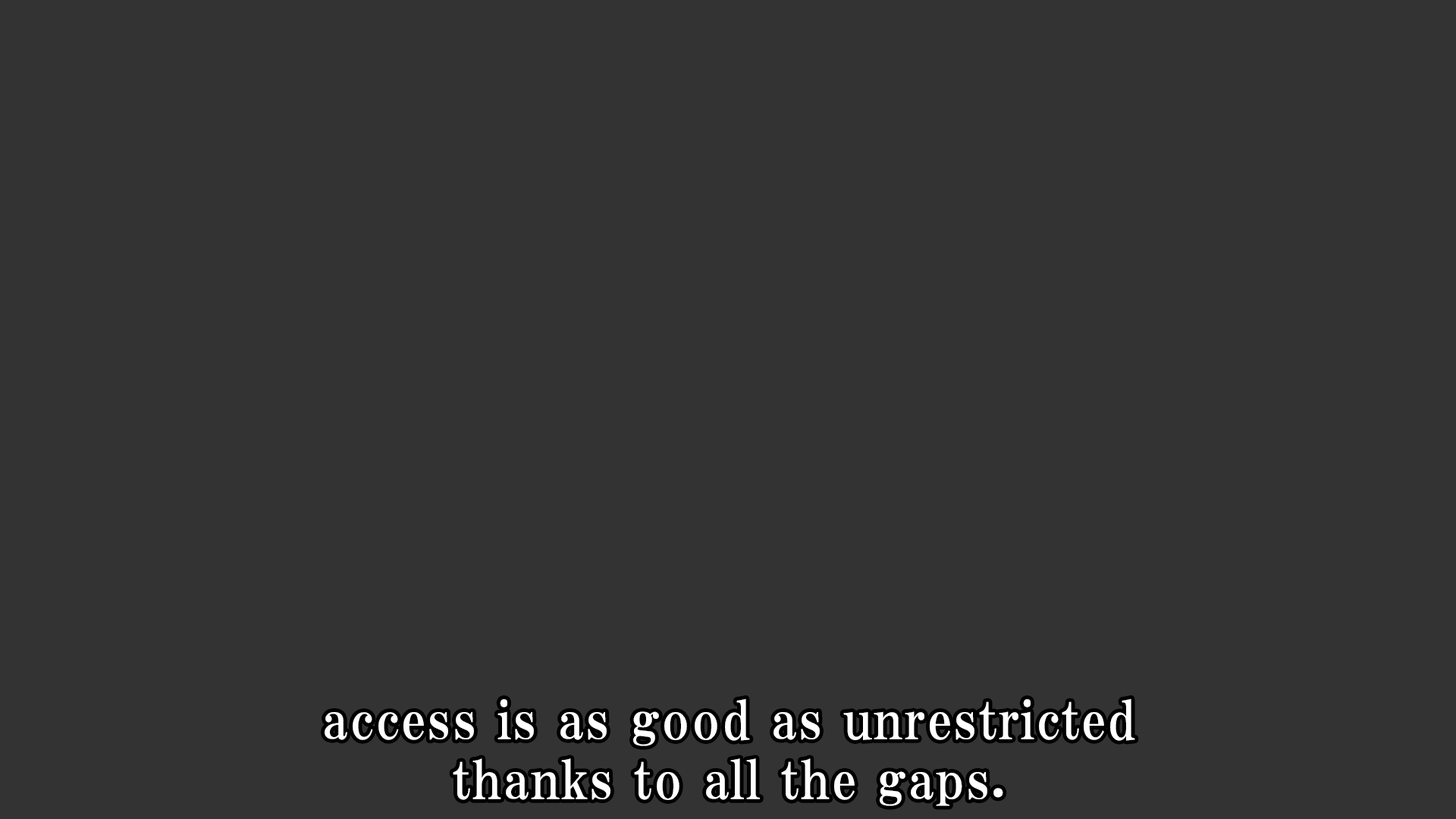
<style>
.page{position:relative;width:1456px;height:819px;background:#333333}
.page>*{position:absolute;margin:0}
.t1{font:53.1px/59.9px "HGPMinchoE";letter-spacing:0.025em;color:#ffffff}
</style>
<div class="page">
<p class="t1" style="left:325px;top:698px;width:810px;height:108px;text-align:center">access is as good as unrestricted<br>thanks to all the gaps.</p>
</div>
